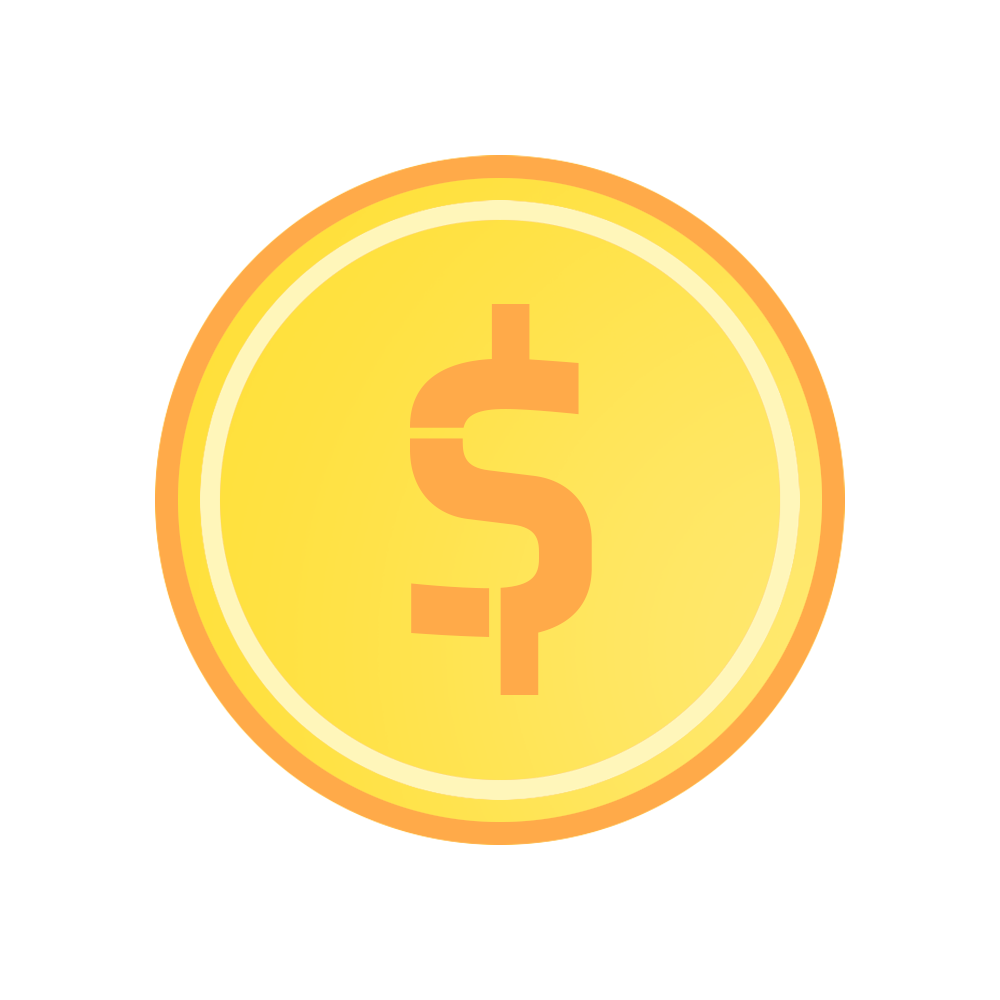
<style>
.page{position:relative;width:1000px;height:1000px;background:#ffffff}
.page>*{position:absolute;margin:0}
.t1{font:400px "AxiaStencilBlack-Regular";letter-spacing:0.075em;color:#ffaa49}
</style>
<div class="page">
<p class="t1" style="left:410px;top:304px;width:182px;height:391px">$</p>
</div>
